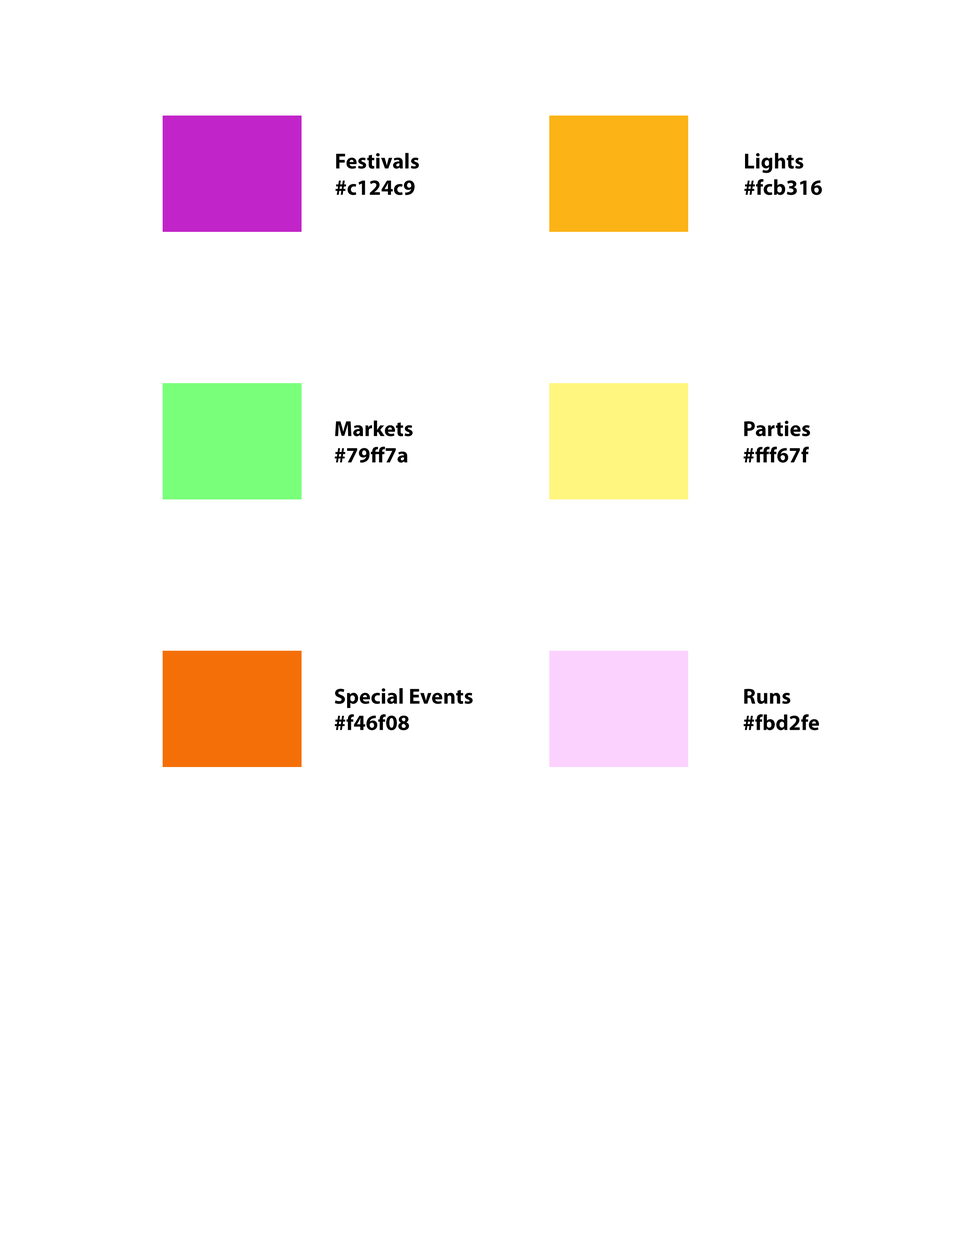
<style>
.page{position:relative;width:960px;height:1242px;background:#ffffff}
.page>*{position:absolute;margin:0}
.t1{font:22px "MyriadPro-Bold";color:#000000}
</style>
<div class="page">
<p class="t1" style="left:335px;top:153px;width:84px;height:42px">Festivals<br>#c124c9</p>
<p class="t1" style="left:744px;top:153px;width:78px;height:42px">Lights<br>#fcb316</p>
<p class="t1" style="left:335px;top:420px;width:78px;height:43px">Markets<br>#79ff7a</p>
<p class="t1" style="left:743px;top:420px;width:67px;height:43px">Parties<br>#fff67f</p>
<p class="t1" style="left:335px;top:688px;width:138px;height:43px">Special Events<br>#f46f08</p>
<p class="t1" style="left:743px;top:689px;width:76px;height:42px">Runs <br>#fbd2fe</p>
</div>
